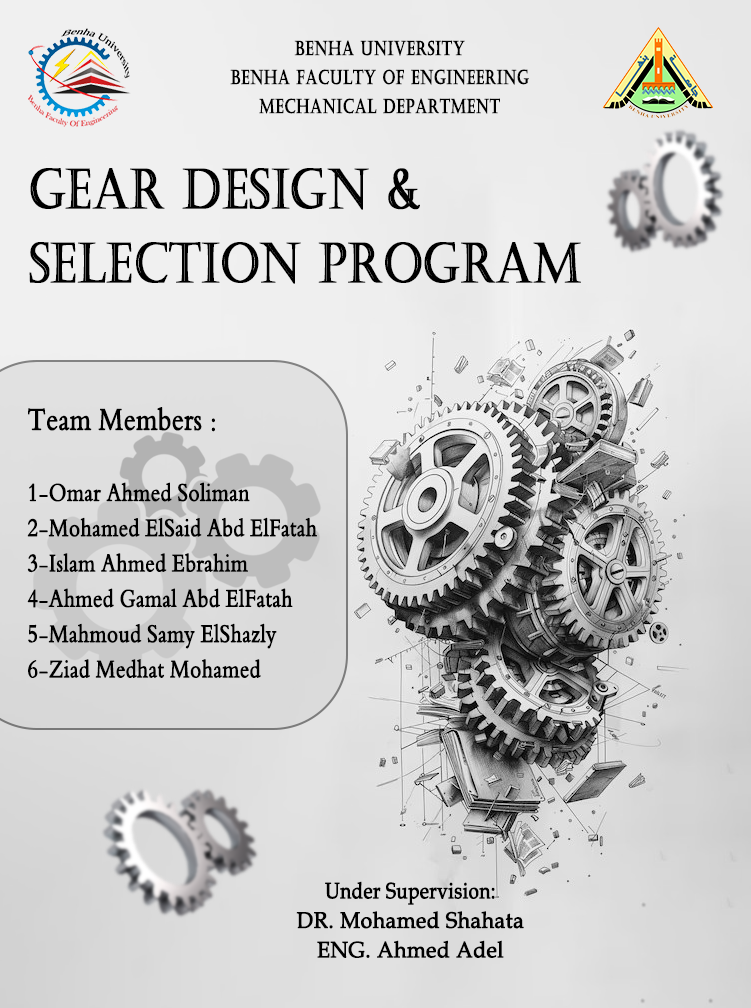
<style>
.page{position:relative;width:751px;height:1008px}
.page>*{position:absolute;margin:0}
.t1{font:19.4px/29px "Castellar";letter-spacing:0.038em;color:#000000;font-weight:bold;scale:0.73 1}
.t2{font:55.2px/74px "Castellar";color:#000000;font-weight:bold;scale:0.81 1}
.t3{font:26.3px/35.3px "TraditionalArabic";color:#000000;font-weight:bold;scale:0.81 1}
.t4{font:32.9px/35.3px "TraditionalArabic";color:#000000;font-weight:bold;scale:0.81 1}
.t5{font:22.3px/29.5px "BookAntiqua";color:#000000;font-weight:bold;scale:0.95 1}
.t6{font:22.3px/29.5px "BookAntiqua";color:#000000;font-weight:bold;scale:0.84 1}
</style>
<div class="page">
<p class="t1" style="left:230px;top:40px;width:299px;height:74px;text-align:center">Benha University<br>Benha Faculty of Engineering<br>Mechanical Department</p>
<p class="t2" style="left:29px;top:168px;width:552px;height:116px">Gear design &amp; <br>Selection program</p>
<p class="t3" style="left:27px;top:407px;width:290px;height:271px"><span class="t4">Team Members :<br></span><br>1-Omar Ahmed Soliman<br>2-Mohamed ElSaid Abd ElFatah<br>3-Islam Ahmed Ebrahim<br>4-Ahmed Gamal Abd ElFatah<br>5-Mahmoud Samy ElShazly<br>6-Ziad Medhat Mohamed</p>
<p class="t5" style="left:296px;top:881px;width:228px;height:77px;text-align:center"><span class="t6">Under Supervision:<br></span>DR. Mohamed Shahata<br>ENG. Ahmed Adel</p>
</div>
